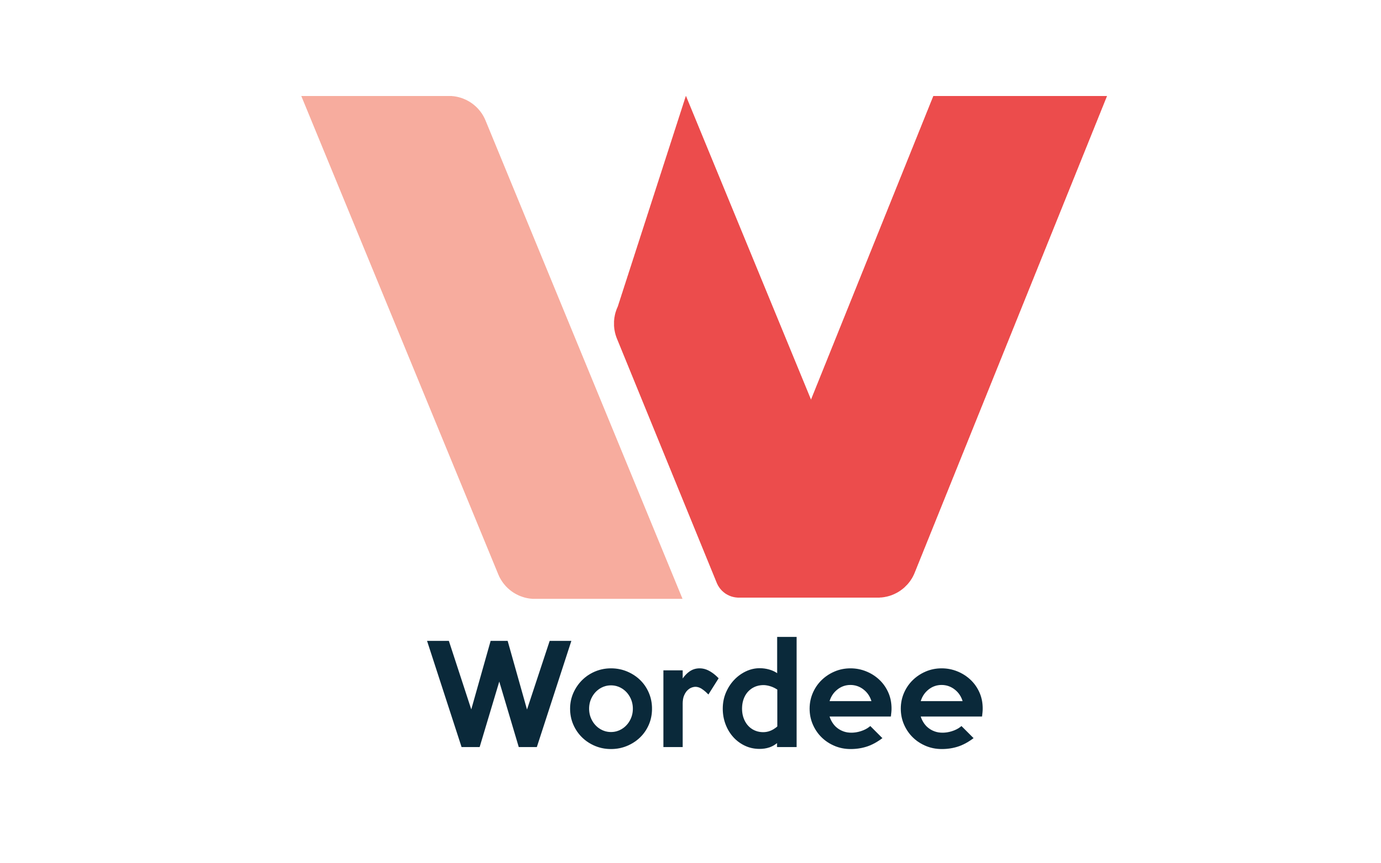
<style>
.page{position:relative;width:1381px;height:863px;background:#ffffff}
.page>*{position:absolute;margin:0}
.t1{font:132.7px "KeepCalm-Medium";color:#0a293a}
</style>
<div class="page">
<p class="t1" style="left:427px;top:637px;width:556px;height:112px">Wordee</p>
</div>
